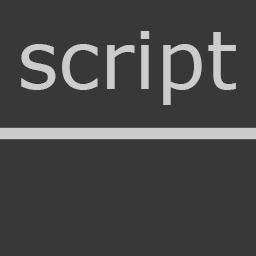
<style>
.page{position:relative;width:256px;height:256px;background:#383838}
.page>*{position:absolute;margin:0}
.t1{font:80px "Verdana";color:#cccccc}
</style>
<div class="page">
<p class="t1" style="left:21px;top:31px;width:215px;height:74px">script</p>
</div>
